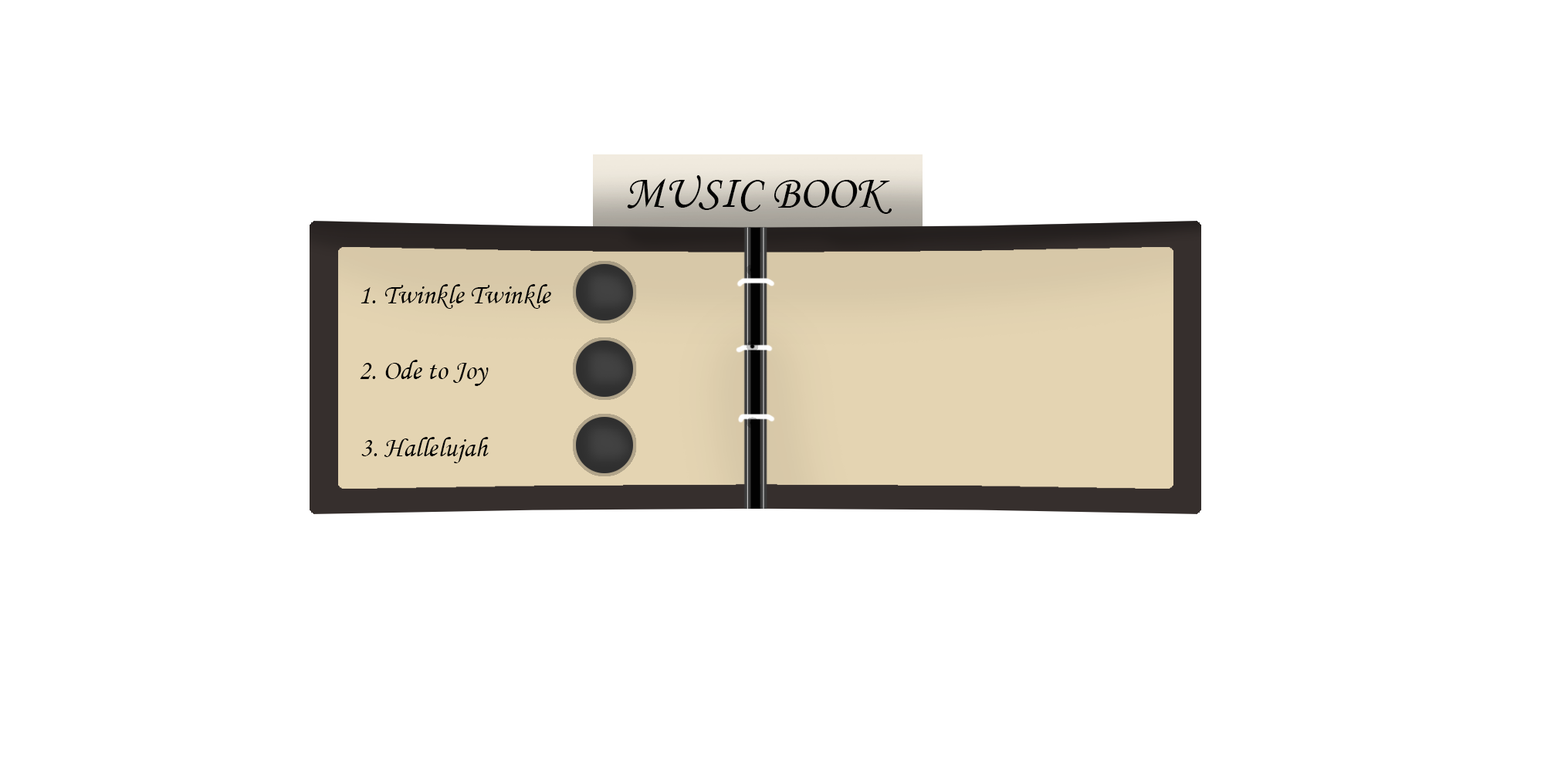
<style>
.page{position:relative;width:1544px;height:772px;background:#ffffff}
.page>*{position:absolute;margin:0}
.t1{font:46.3px "MonotypeCorsiva";color:#020202}
.t2{font:27.8px "MonotypeCorsiva";color:#020202}
</style>
<div class="page">
<p class="t1" style="left:627px;top:175px;width:265px;height:39px">MUSIC BOOK</p>
<p class="t2" style="left:361px;top:284px;width:190px;height:25px">1. Twinkle Twinkle</p>
<p class="t2" style="left:360px;top:360px;width:129px;height:26px">2. Ode to Joy</p>
<p class="t2" style="left:361px;top:437px;width:128px;height:26px">3. Hallelujah</p>
</div>
